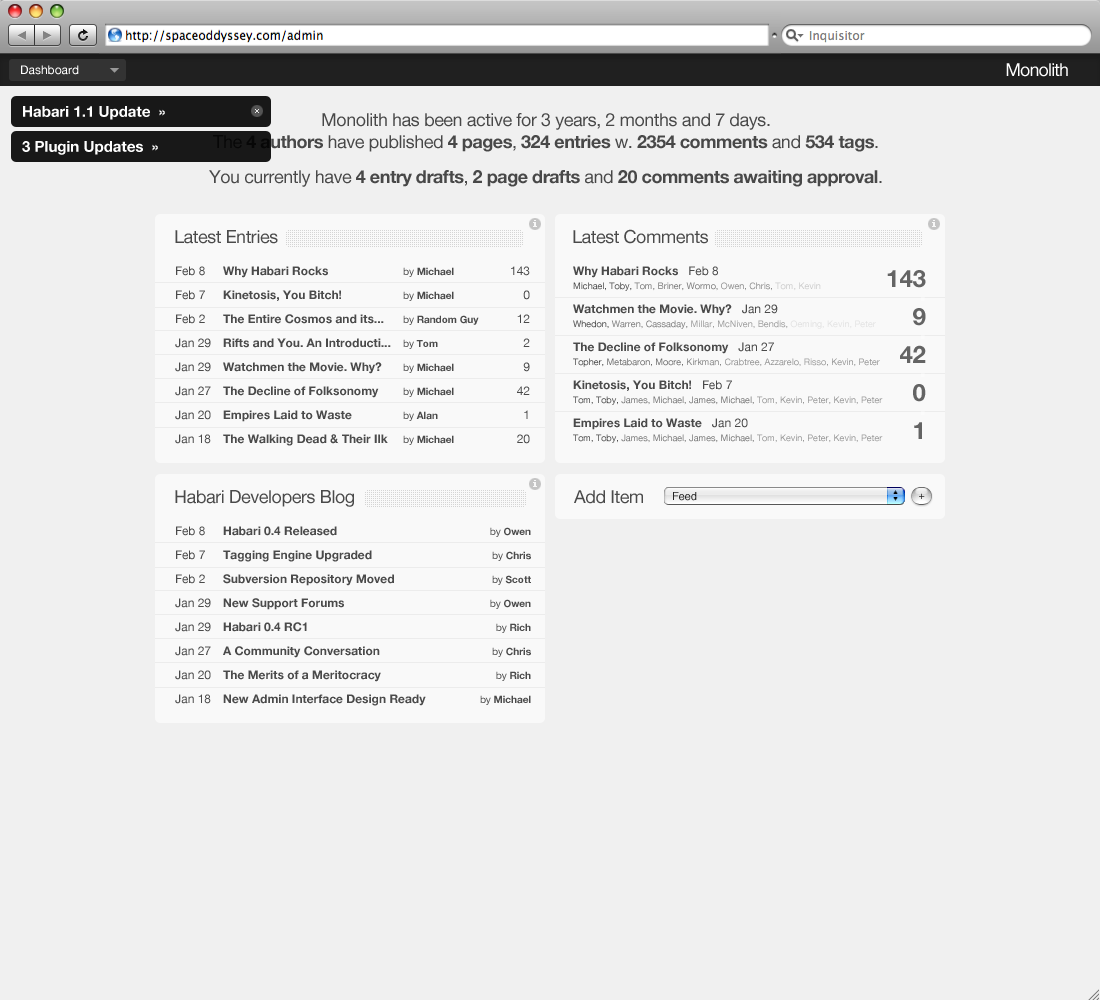
<style>
.page{position:relative;width:1100px;height:1000px;background:#f0f0f0}
.page>*{position:absolute;margin:0}
.t1{font:12px "HelveticaNeue";color:#ffffff}
.t2{font:18px "HelveticaNeue";letter-spacing:-0.05em;color:#ffffff}
.t3{font:15px "HelveticaNeue-Bold";color:#fefefe}
.t4{font:18px "HelveticaNeue";letter-spacing:-0.025em;color:#484848}
.t5{font:18px "HelveticaNeue-Bold";letter-spacing:-0.025em;color:#484848}
.t6{font:18px "HelveticaNeue";letter-spacing:-0.025em;color:#4a4a4a}
.t7{font:12px/24px "HelveticaNeue";color:#4a4a4a}
.t8{font:12px/24px "HelveticaNeue-Bold";color:#4a4a4a}
.t9{font:10px/24px "HelveticaNeue";color:#4a4a4a}
.t10{font:10px/24px "HelveticaNeue-Bold";color:#4a4a4a}
.t11{font:9px/14px "HelveticaNeue";color:#414141}
.t12{font:12px/24px "HelveticaNeue-Bold";color:#000000}
.t13{font:12px/24px "HelveticaNeue";color:#000000}
.t14{font:9px/14px "HelveticaNeue";color:#000000}
.t15{font:9px/14px "HelveticaNeue";color:#444444}
.t16{font:9px/14px "HelveticaNeue";color:#5f5f5f}
.t17{font:9px/14px "HelveticaNeue";color:#b8b8b8}
.t18{font:9px/14px "HelveticaNeue";color:#464646}
.t19{font:9px/14px "HelveticaNeue";color:#757575}
.t20{font:9px/14px "HelveticaNeue";color:#d5d5d5}
.t21{font:9px/14px "HelveticaNeue";color:#d9d9d9}
.t22{font:9px/14px "HelveticaNeue";color:#333333}
.t23{font:9px/14px "HelveticaNeue";color:#565656}
.t24{font:9px/14px "HelveticaNeue";color:#6b6b6b}
.t25{font:9px/14px "HelveticaNeue";color:#6f6f6f}
.t26{font:24px/24px "HelveticaNeue-Bold";color:#646464}
.t27{font:24px/14px "HelveticaNeue-Bold";color:#646464}
.t28{font:11px "Helvetica";color:#242424}
</style>
<div class="page">
<p class="t1" style="left:21px;top:65px;width:58px;height:10px">Dashboard</p>
<p class="t2" style="left:1006px;top:63px;width:62px;height:14px">Monolith</p>
<p class="t3" style="left:23px;top:106px;width:142px;height:14px">Habari 1.1 Update  »</p>
<p class="t4" style="left:209px;top:113px;width:673px;height:74px;text-align:center">Monolith has been active for 3 years, 2 months and 7 days.<br>The <span class="t5">4 authors</span> have published <span class="t5">4 pages</span>, <span class="t5">324 entries</span> w. <span class="t5">2354 comments</span> and <span class="t5">534 tags</span>.<br><br>You currently have <span class="t5">4 entry drafts</span>, <span class="t5">2 page drafts</span> and <span class="t5">20 comments awaiting approval</span>.</p>
<p class="t3" style="left:22px;top:141px;width:136px;height:14px">3 Plugin Updates  »</p>
<p class="t6" style="left:175px;top:230px;width:103px;height:14px">Latest Entries</p>
<p class="t6" style="left:573px;top:229px;width:135px;height:15px">Latest Comments</p>
<p class="t7" style="left:175px;top:266px;width:36px;height:178px">Feb 8<br>Feb 7<br>Feb 2<br>Jan 29<br>Jan 29<br>Jan 27<br>Jan 20<br>Jan 18</p>
<p class="t8" style="left:223px;top:266px;width:256px;height:180px">Why Habari Rocks   <span class="t9">by </span><span class="t10">Michael<br></span>Kinetosis, You Bitch!   <span class="t9">by </span><span class="t10">Michael<br></span>The Entire Cosmos and its...  <span class="t9">by</span><span class="t10"> Random Guy<br></span>Rifts and You. An Introducti... <span class="t9">by </span><span class="t10">Tom<br></span>Watchmen the Movie. Why? <span class="t9">by </span><span class="t10">Michael<br></span>The Decline of Folksonomy <span class="t9">by </span><span class="t10">Michael<br></span>Empires Laid to Waste  <span class="t9">by </span><span class="t10">Alan<br></span>The Walking Dead &amp; Their Ilk <span class="t9">by </span><span class="t10">Michael</span></p>
<p class="t7" style="left:511px;top:266px;width:19px;height:178px;text-align:right">143<br>0<br>12<br>2<br>9<br>42<br>1<br>20</p>
<p class="t11" style="left:573px;top:266px;width:310px;height:177px;opacity:0.7"><span class="t12">Why Habari Rocks</span><span class="t13">   Feb 8<br></span><span class="t14">Michael, Toby, </span><span class="t15">Tom, Briner, Wormo, </span><span class="t16">Owen, Chris, </span><span class="t17">Tom, Kevin<br></span><span class="t12">Watchmen the Movie. Why?   </span><span class="t13">Jan 29<br></span><span class="t14">Whedon, </span><span class="t18">Warren, Cassaday, </span><span class="t19">Millar, McNiven, Bendis, </span><span class="t20">Oeming</span><span class="t21">, Kevin, Peter<br></span><span class="t12">The Decline of Folksonomy   </span><span class="t13">Jan 27<br></span><span class="t14">Topher, </span><span class="t22">Metabaron, Moore,</span><span class="t23"> Kirkman, </span><span class="t24">Crabtree, Azzarelo</span><span class="t19">, Risso</span><span class="t25">, Kevin, Peter<br></span><span class="t12">Kinetosis, You Bitch!   </span><span class="t13">Feb 7<br></span><span class="t14">Tom, Toby, </span>James, Michael, James, Michael, <span class="t25">Tom, Kevin, Peter, Kevin, Peter<br></span><span class="t12">Empires Laid to Waste   </span><span class="t13">Jan 20<br></span><span class="t14">Tom, Toby, </span>James, Michael, James, Michael, <span class="t25">Tom, Kevin, Peter, Kevin, Peter</span></p>
<p class="t26" style="left:887px;top:270px;width:39px;height:169px;text-align:right">143<br><span class="t27">.<br></span>9<br><span class="t27">.<br></span>42<br><span class="t27">.<br></span>0<br><span class="t27">.<br></span>1</p>
<p class="t6" style="left:175px;top:490px;width:179px;height:17px">Habari Developers Blog</p>
<p class="t6" style="left:574px;top:490px;width:69px;height:14px">Add Item</p>
<p class="t28" style="left:673px;top:492px;width:24px;height:9px">Feed</p>
<p class="t28" style="left:919px;top:493px;width:6px;height:6px">+</p>
<p class="t7" style="left:175px;top:526px;width:36px;height:178px">Feb 8<br>Feb 7<br>Feb 2<br>Jan 29<br>Jan 29<br>Jan 27<br>Jan 20<br>Jan 18</p>
<p class="t8" style="left:223px;top:526px;width:203px;height:180px">Habari 0.4 Released<br>Tagging Engine Upgraded<br>Subversion Repository Moved<br>New Support Forums<br>Habari 0.4 RC1<br>A Community Conversation<br>The Merits of a Meritocracy<br>New Admin Interface Design Ready</p>
<p class="t10" style="left:480px;top:527px;width:51px;height:178px;text-align:right"><span class="t9">by </span>Owen<br><span class="t9">by </span>Chris<br><span class="t9">by</span> Scott<br><span class="t9">by </span>Owen<br><span class="t9">by </span>Rich<br><span class="t9">by </span>Chris<br><span class="t9">by </span>Rich<br><span class="t9">by </span>Michael</p>
</div>
